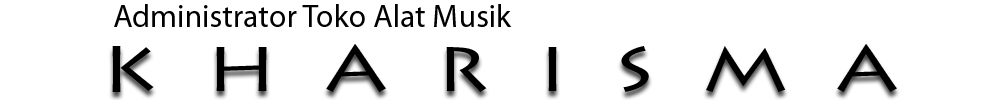
<style>
.page{position:relative;width:1000px;height:100px;background:#ffffff}
.page>*{position:absolute;margin:0}
.t1{font:32px "MyriadPro-Regular";color:#000000}
.t2{font:64px "LithosPro-Regular";color:#000000;scale:1.23 1}
</style>
<div class="page">
<p class="t1" style="left:114px;top:4px;width:398px;height:23px">Administrator Toko Alat Musik</p>
<p class="t2" style="left:112px;top:44px;width:785px;height:48px">K  H  A  R  I  S  M  A</p>
</div>
